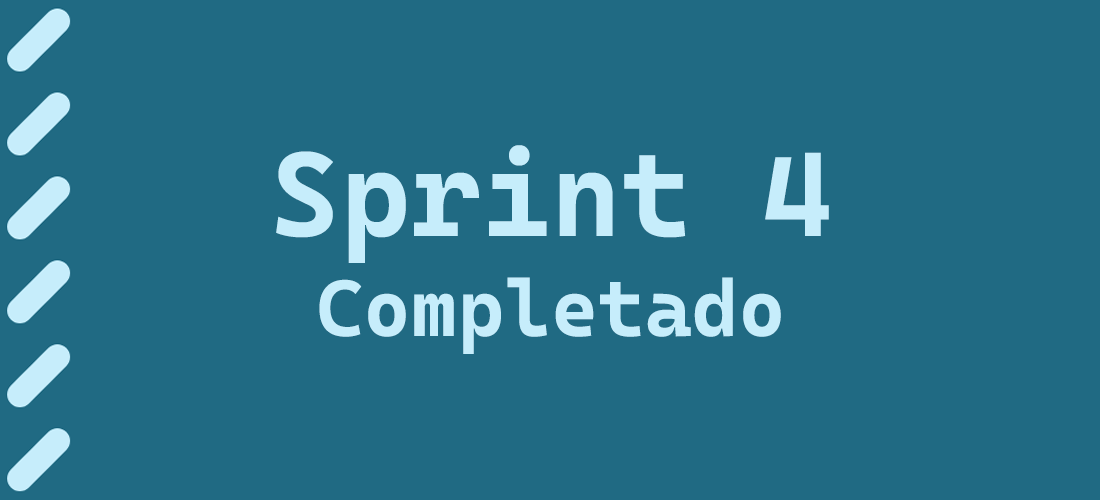
<style>
.page{position:relative;width:1100px;height:500px;background:#206a83}
.page>*{position:absolute;margin:0}
.t1{font:80px/100px "CascadiaCodeRoman-Bold";color:#c6edfb;font-weight:bold}
.t2{font:120px/40px "CascadiaCodeRoman-Bold";color:#c6edfb;font-weight:bold}
</style>
<div class="page">
<p class="t1" style="left:276px;top:145px;width:553px;height:209px;text-align:center"><span class="t2">Sprint 4<br></span>Completado</p>
</div>
